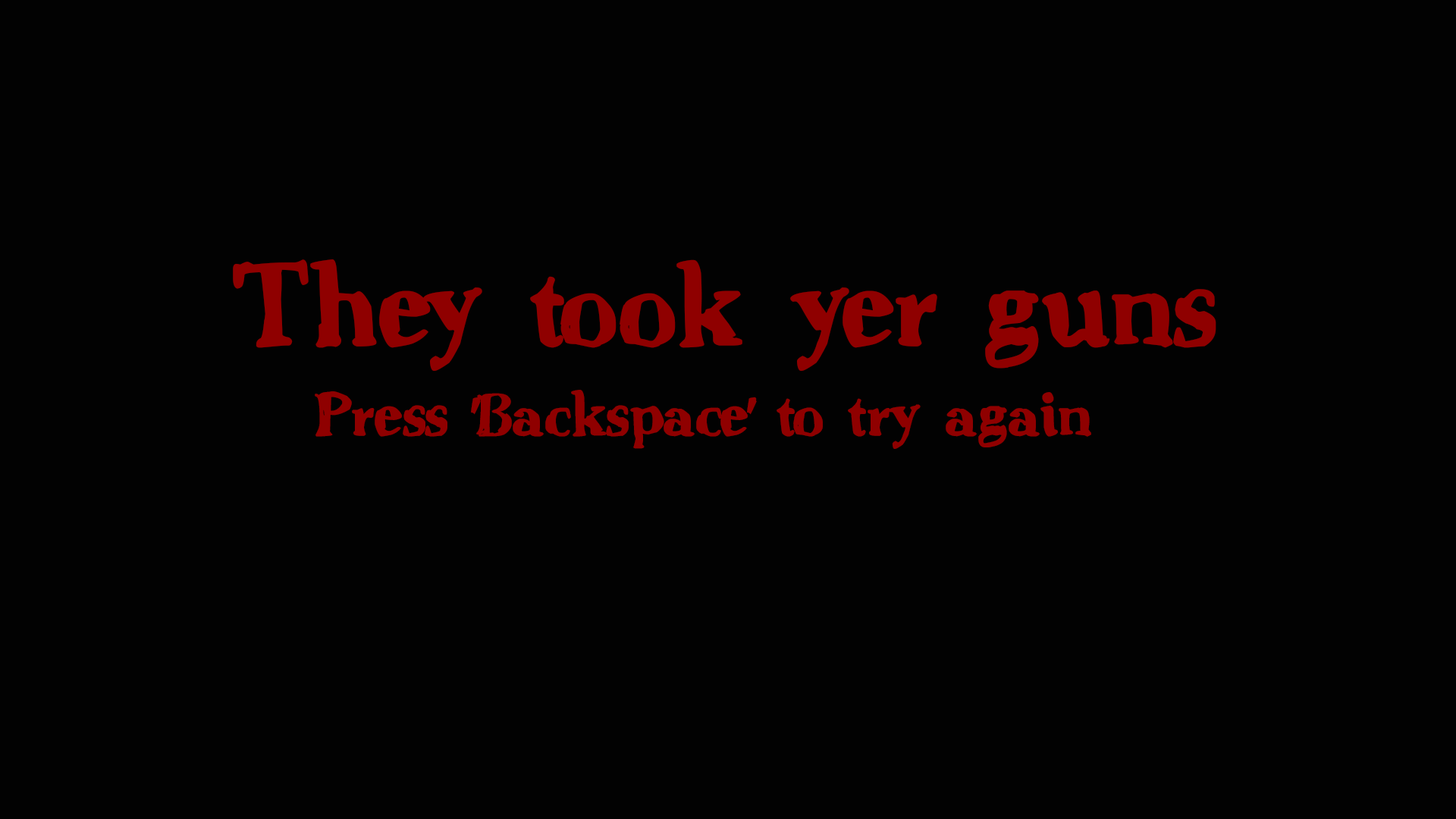
<style>
.page{position:relative;width:1456px;height:819px;background:#020202}
.page>*{position:absolute;margin:0}
.t1{font:113.7px "CountryGold";color:#8f0000}
.t2{font:60.7px "CountryGold";color:#8f0000}
</style>
<div class="page">
<p class="t1" style="left:233px;top:259px;width:983px;height:113px">They took yer guns</p>
<p class="t2" style="left:315px;top:390px;width:776px;height:59px">Press 'Backspace' to try again</p>
</div>
